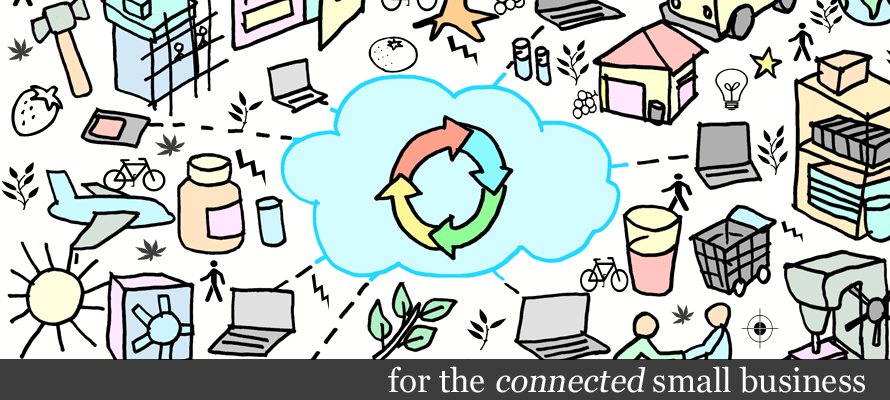
<style>
.page{position:relative;width:890px;height:400px;background:#fffffe}
.page>*{position:absolute;margin:0}
.t1{font:33.3px "Georgia";color:#ffffff}
.t2{font:33.3px "Georgia";color:#ffffff;font-style:italic}
</style>
<div class="page">
<p class="t1" style="left:388px;top:366px;width:477px;height:27px">for the <span class="t2">connected </span>small business</p>
</div>
